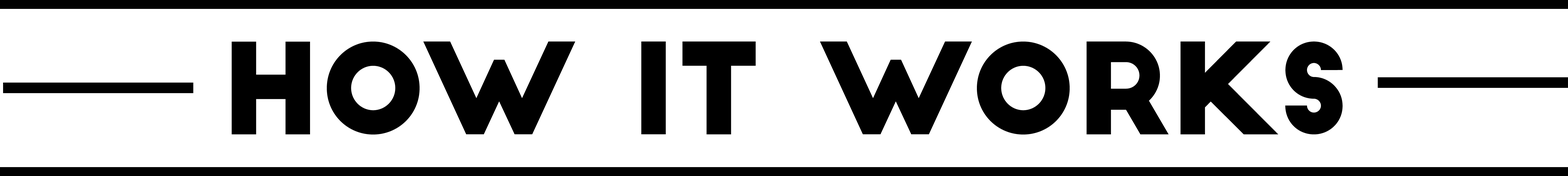
<style>
.page{position:relative;width:1568px;height:176px;background:#ffffff}
.page>*{position:absolute;margin:0}
.t1{font:123.8px "BigJohn";color:#000000}
</style>
<div class="page">
<p class="t1" style="left:231px;top:42px;width:1112px;height:93px">HOW IT WORKS</p>
</div>
